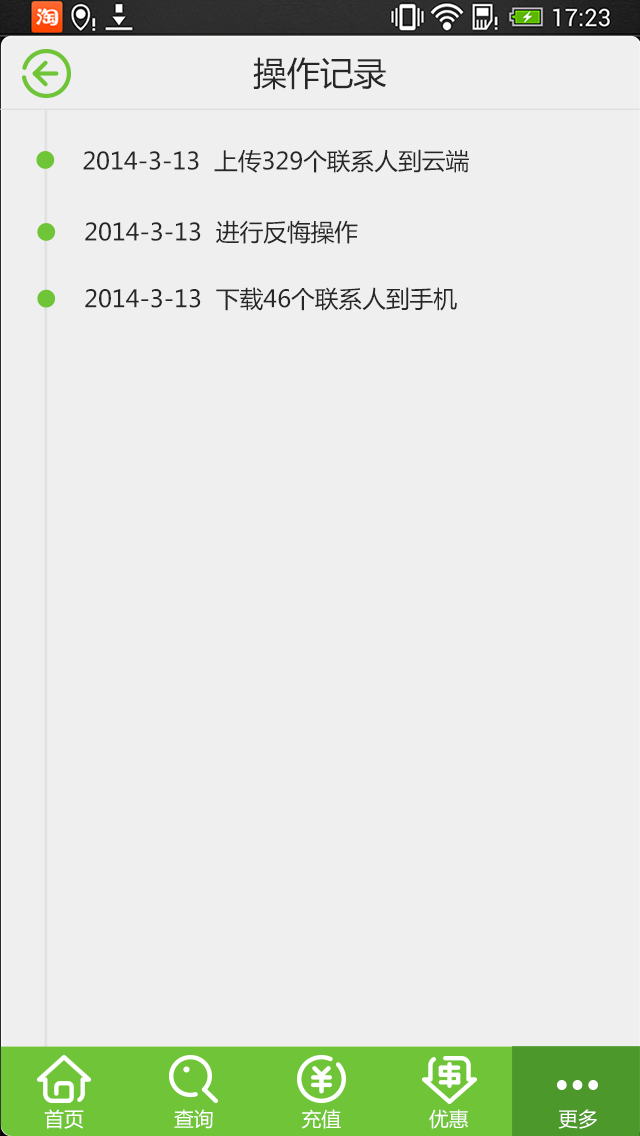
<style>
.page{position:relative;width:640px;height:1136px;background:#efefef}
.page>*{position:absolute;margin:0}
.t1{font:33.3px "MicrosoftYaHei";color:#272727}
.t2{font:23.7px "MicrosoftYaHei";color:#272727}
.t3{font:19.8px "MicrosoftYaHei";color:#ffffff}
</style>
<div class="page">
<p class="t1" style="left:253px;top:57px;width:133px;height:33px">操作记录</p>
<p class="t2" style="left:83px;top:149px;width:386px;height:24px">2014-3-13  上传329个联系人到云端</p>
<p class="t2" style="left:85px;top:220px;width:273px;height:24px">2014-3-13  进行反悔操作</p>
<p class="t2" style="left:85px;top:287px;width:372px;height:24px">2014-3-13  下载46个联系人到手机</p>
<p class="t3" style="left:44px;top:1109px;width:40px;height:20px">首页</p>
<p class="t3" style="left:174px;top:1109px;width:39px;height:20px">查询</p>
<p class="t3" style="left:301px;top:1109px;width:40px;height:20px">充值</p>
<p class="t3" style="left:429px;top:1109px;width:39px;height:20px">优惠</p>
<p class="t3" style="left:558px;top:1109px;width:39px;height:20px">更多</p>
</div>
